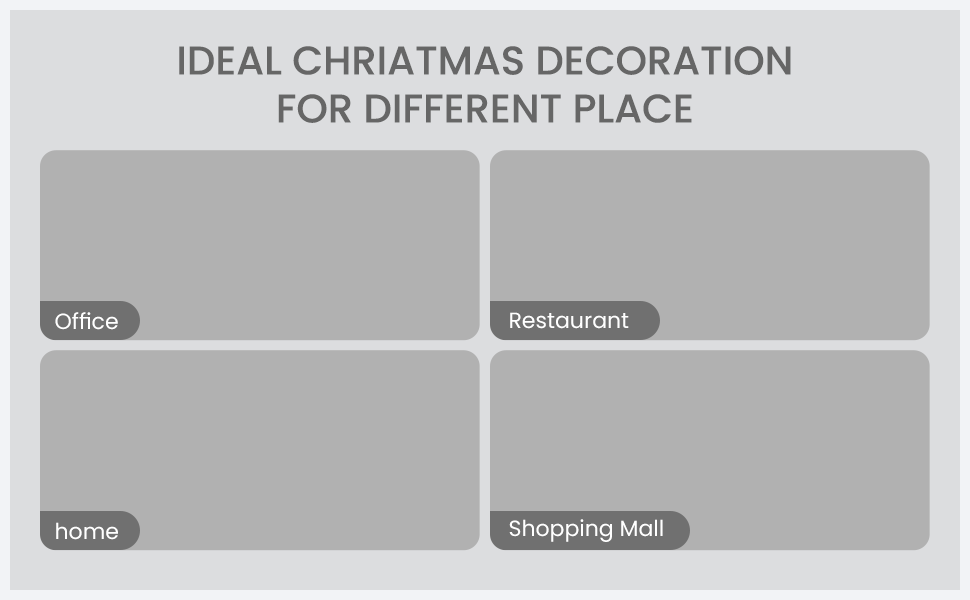
<style>
.page{position:relative;width:970px;height:600px;background:#b1b1b1}
.page>*{position:absolute;margin:0}
.t1{font:40px "Poppins-Medium";color:#666666}
.t2{font:22px "Poppins-Regular";color:#ffffff}
</style>
<div class="page">
<p class="t1" style="left:179px;top:46px;width:612px;height:77px;text-align:center">IDEAL CHRIATMAS DECORATION<br>FOR DIFFERENT PLACE</p>
<p class="t2" style="left:55px;top:312px;width:63px;height:18px">Office</p>
<p class="t2" style="left:510px;top:312px;width:119px;height:17px">Restaurant</p>
<p class="t2" style="left:509px;top:519px;width:154px;height:23px">Shopping Mall</p>
<p class="t2" style="left:56px;top:522px;width:62px;height:18px">home</p>
</div>
